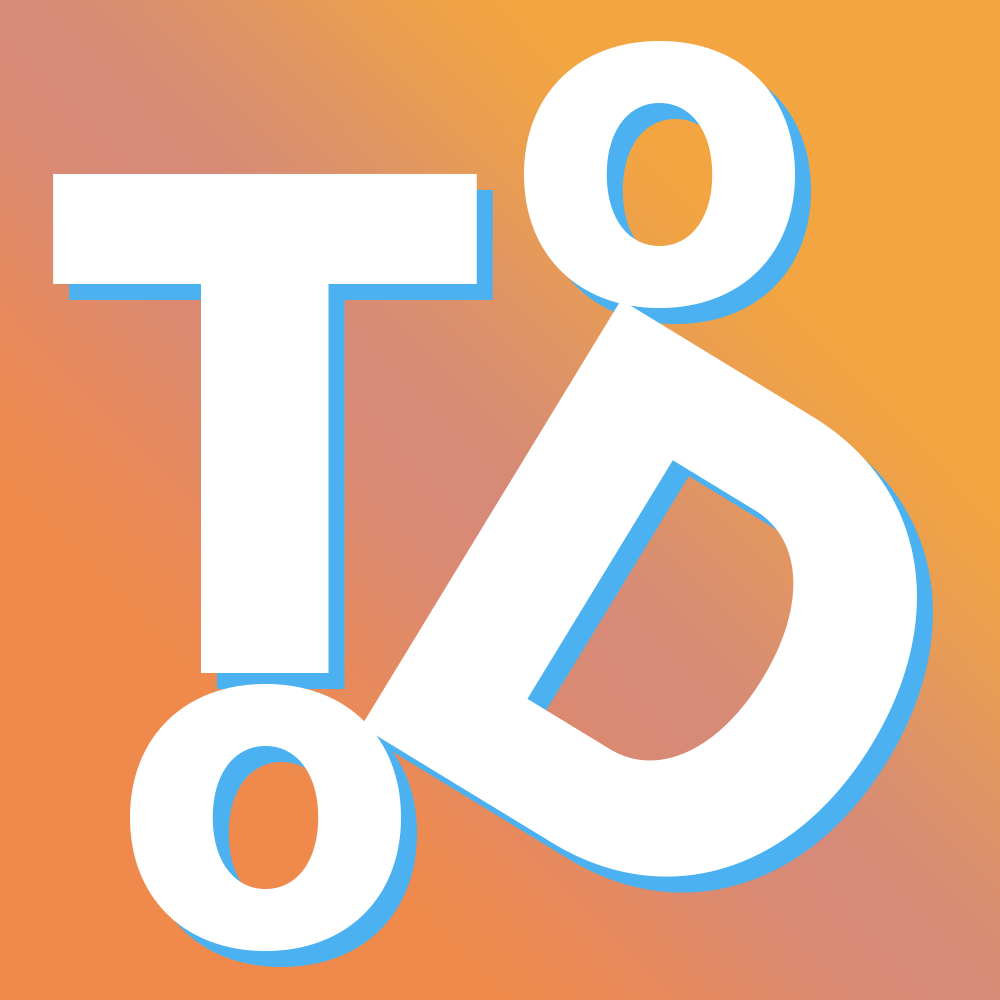
<style>
.page{position:relative;width:1000px;height:1000px;background:#ffffff}
.page>*{position:absolute;margin:0}
.t1{font:489.8px "Sublima-ExtraBold";color:#ffffff}
.t2{font:694.8px "Sublima-ExtraBold";color:#ffffff}
.t3{font:694.7px "Sublima-ExtraBold";color:#ffffff}
</style>
<div class="page">
<p class="t1" style="left:524px;top:40px;width:271px;height:268px">o</p>
<p class="t2" style="left:53px;top:173px;width:424px;height:500px">T</p>
<p class="t3" style="left:361px;top:299px;width:556px;height:578px;rotate:31deg">D</p>
<p class="t1" style="left:130px;top:683px;width:271px;height:268px">o</p>
</div>
